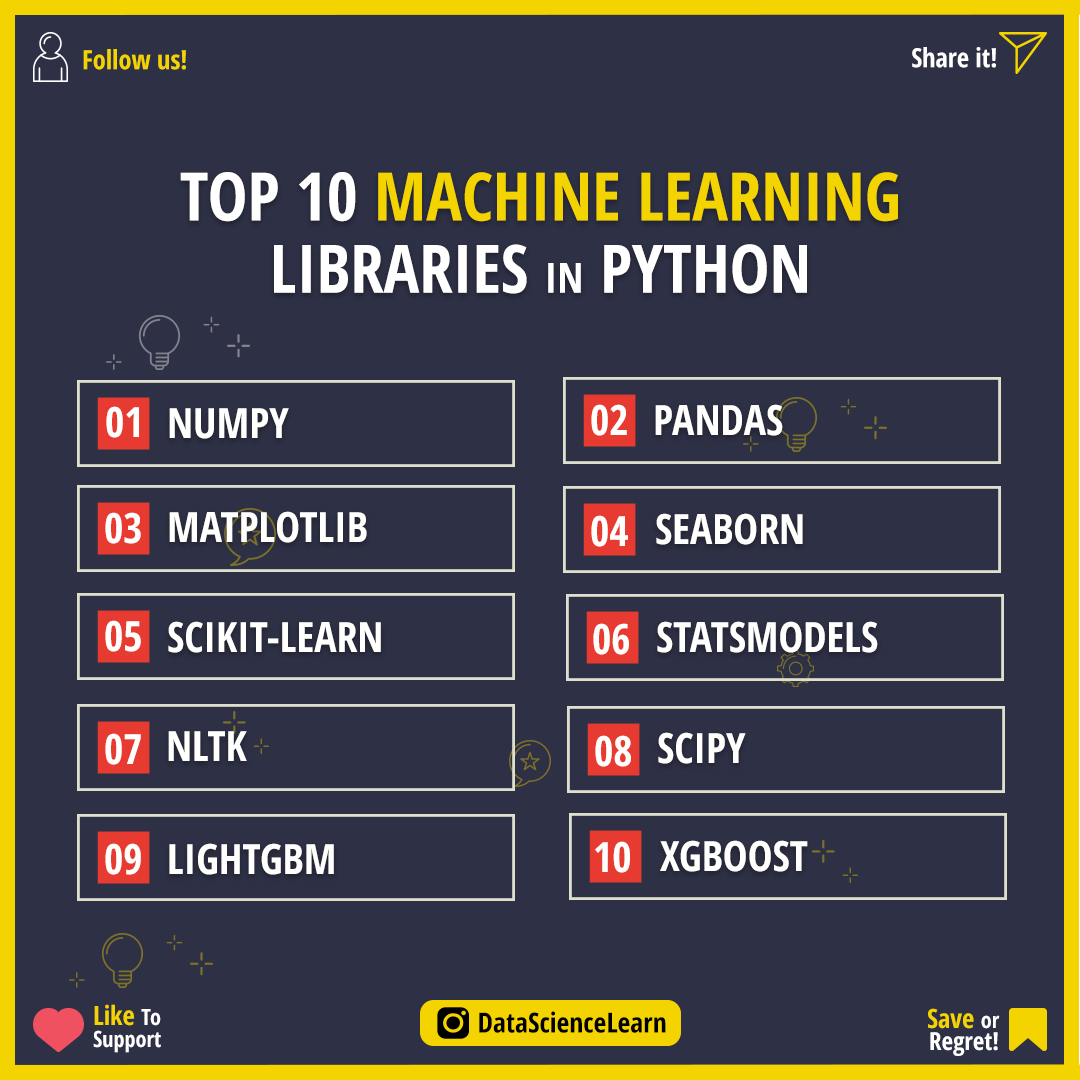
<style>
.page{position:relative;width:1080px;height:1080px;background:#2e3045}
.page>*{position:absolute;margin:0}
.t1{font:26.4px "OpenSans-CondensedBold";color:#f3d400}
.t2{font:26.4px "OpenSans-CondensedBold";color:#ffffff}
.t3{font:66.7px/72.2px "OpenSans-CondensedBold";color:#f3d400}
.t4{font:66.7px/72.2px "OpenSans-CondensedBold";color:#ffffff}
.t5{font:41.7px/72.2px "OpenSans-CondensedBold";color:#ffffff}
.t6{font:41.7px "OpenSans-CondensedBold";color:#fffffe}
.t7{font:22.2px/22.2px "OpenSans-CondensedBold";color:#ffffff}
.t8{font:26.4px/22.2px "OpenSans-CondensedBold";color:#f3d400}
.t9{font:27.8px "OpenSans-CondensedBold";color:#000000}
.t10{font:25px/22.2px "OpenSans-CondensedBold";color:#ffffff}
</style>
<div class="page">
<p class="t1" style="left:83px;top:49px;width:103px;height:21px">Follow us!</p>
<p class="t2" style="left:912px;top:47px;width:84px;height:21px">Share it!</p>
<p class="t3" style="left:180px;top:172px;width:718px;height:122px;text-align:center"><span class="t4">TOP 10 </span>MACHINE LEARNING<br><span class="t4">LIBRARIES </span><span class="t5">IN</span><span class="t4"> PYTHON</span></p>
<p class="t6" style="left:106px;top:406px;width:33px;height:32px">01</p>
<p class="t6" style="left:169px;top:408px;width:120px;height:31px">NUMPY</p>
<p class="t6" style="left:591px;top:404px;width:36px;height:32px">02</p>
<p class="t6" style="left:655px;top:404px;width:128px;height:32px">PANDAS</p>
<p class="t6" style="left:105px;top:512px;width:36px;height:32px">03</p>
<p class="t6" style="left:169px;top:511px;width:198px;height:32px">MATPLOTLIB</p>
<p class="t6" style="left:591px;top:515px;width:37px;height:32px">04</p>
<p class="t6" style="left:656px;top:513px;width:147px;height:32px">SEABORN</p>
<p class="t6" style="left:105px;top:620px;width:36px;height:32px">05</p>
<p class="t6" style="left:168px;top:621px;width:213px;height:32px">SCIKIT-LEARN</p>
<p class="t6" style="left:593px;top:623px;width:36px;height:32px">06</p>
<p class="t6" style="left:657px;top:621px;width:221px;height:32px">STATSMODELS</p>
<p class="t6" style="left:105px;top:733px;width:36px;height:32px">07</p>
<p class="t6" style="left:168px;top:731px;width:79px;height:30px">NLTK</p>
<p class="t6" style="left:595px;top:735px;width:36px;height:32px">08</p>
<p class="t6" style="left:658px;top:732px;width:88px;height:32px">SCIPY</p>
<p class="t6" style="left:105px;top:843px;width:36px;height:32px">09</p>
<p class="t6" style="left:169px;top:843px;width:165px;height:32px">LIGHTGBM</p>
<p class="t6" style="left:595px;top:841px;width:35px;height:32px">10</p>
<p class="t6" style="left:660px;top:840px;width:148px;height:32px">XGBOOST</p>
<p class="t7" style="left:93px;top:1004px;width:68px;height:49px"><span class="t8">Like </span>To<br>Support</p>
<p class="t9" style="left:479px;top:1011px;width:187px;height:22px">DataScienceLearn</p>
<p class="t10" style="left:928px;top:1008px;width:72px;height:48px;text-align:right"><span class="t8">Save </span><span class="t7">or<br></span>Regret!</p>
</div>
